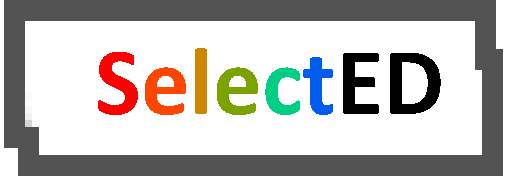
<style>
.page{position:relative;width:512px;height:176px;background:#ffffff}
.page>*{position:absolute;margin:0}
.t1{font:97px "Calibri-Bold";color:#000000}
.t2{font:97px "Calibri-Bold";color:#ff0000}
.t3{font:97px "Calibri-Bold";color:#ff4600}
.t4{font:97px "Calibri-Bold";color:#ce8500}
.t5{font:97px "Calibri-Bold";color:#7ba300}
.t6{font:97px "Calibri-Bold";color:#00ce82}
.t7{font:97px "Calibri-Bold";color:#005df0}
</style>
<div class="page">
<p class="t1" style="left:98px;top:48px;width:343px;height:67px"><span class="t2">S</span><span class="t3">e</span><span class="t4">l</span><span class="t5">e</span><span class="t6">c</span><span class="t7">t</span>ED</p>
</div>
